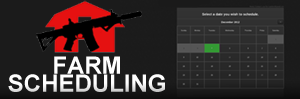
<style>
.page{position:relative;width:300px;height:99px;background:#1b1b1b}
.page>*{position:absolute;margin:0}
.t1{font:24px/18px "Arial-BoldMT";color:#ffffff}
</style>
<div class="page">
<p class="t1" style="left:8px;top:56px;width:157px;height:36px;text-align:center">FARM<br>SCHEDULING</p>
</div>
